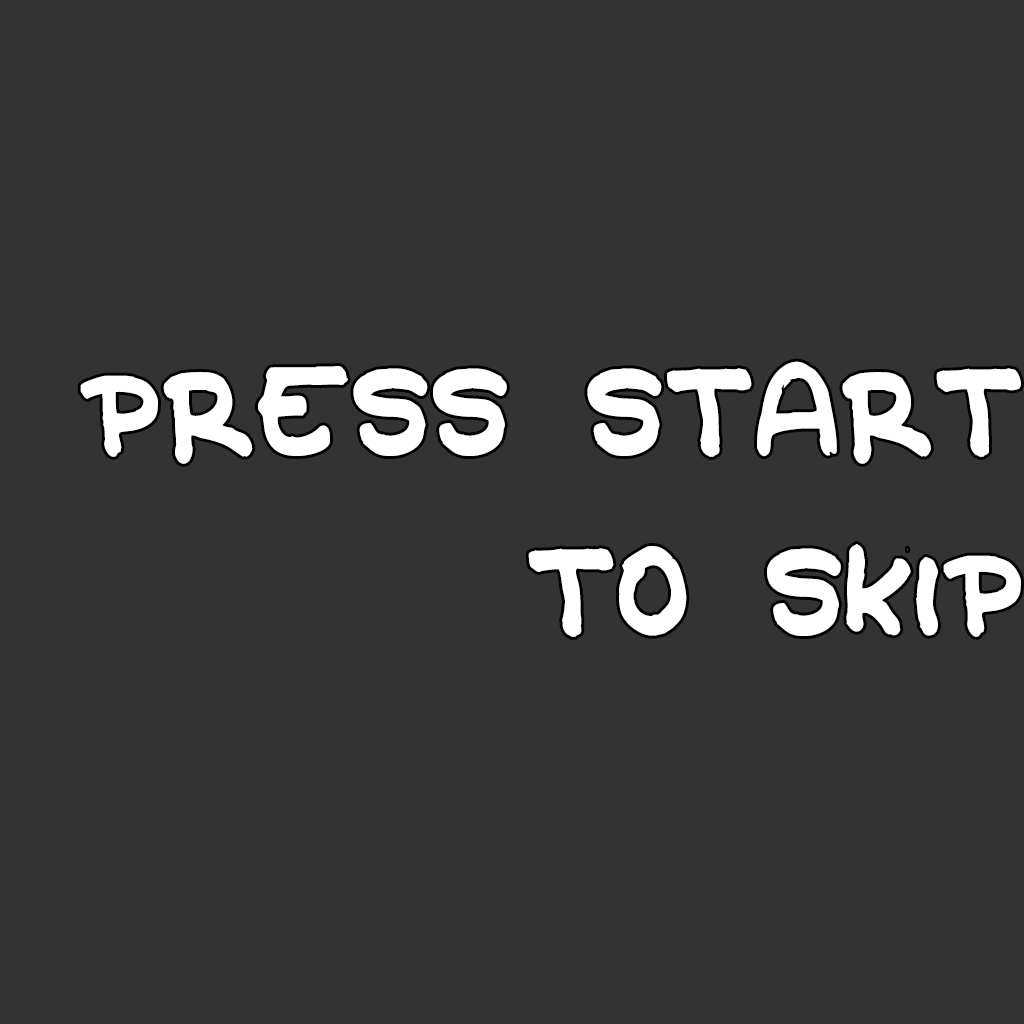
<style>
.page{position:relative;width:1024px;height:1024px;background:#333333}
.page>*{position:absolute;margin:0}
.t1{font:150px "OldCave";color:#ffffff}
</style>
<div class="page">
<p class="t1" style="left:80px;top:361px;width:941px;height:276px;text-align:right">Press start<br>to skip</p>
</div>
